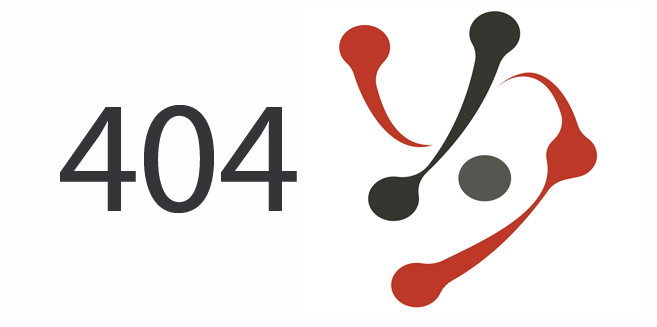
<style>
.page{position:relative;width:657px;height:327px;background:#fefefe}
.page>*{position:absolute;margin:0}
.t1{font:160px "MyriadPro-Regular";letter-spacing:-0.01em;color:#343539}
</style>
<div class="page">
<p class="t1" style="left:60px;top:105px;width:237px;height:108px">404</p>
</div>
